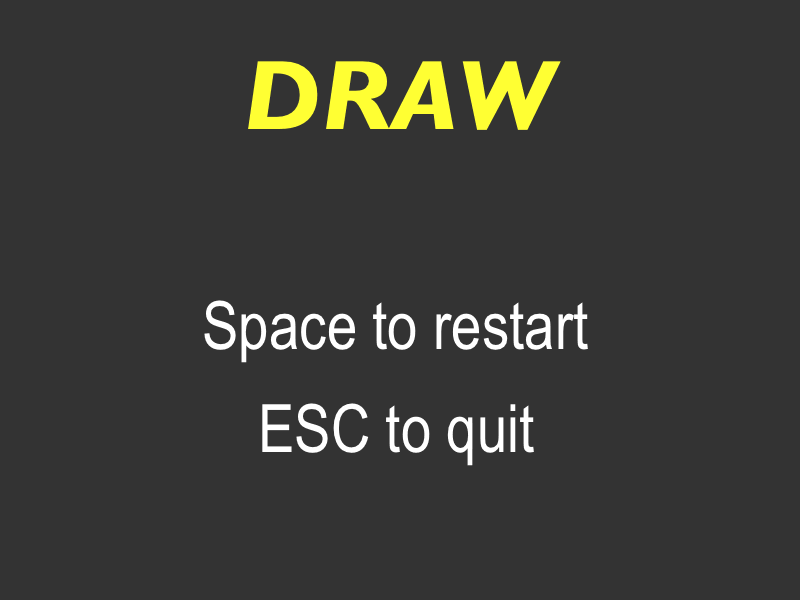
<style>
.page{position:relative;width:800px;height:600px;background:#333333}
.page>*{position:absolute;margin:0}
.t1{font:100px "GillSans-BoldItalic";color:#ffff33}
.t2{font:66.7px "ArialNarrow";color:#ffffff}
</style>
<div class="page">
<p class="t1" style="left:248px;top:61px;width:313px;height:69px">DRAW</p>
<p class="t2" style="left:204px;top:300px;width:384px;height:63px">Space to restart</p>
<p class="t2" style="left:262px;top:403px;width:272px;height:63px">ESC to quit</p>
</div>
